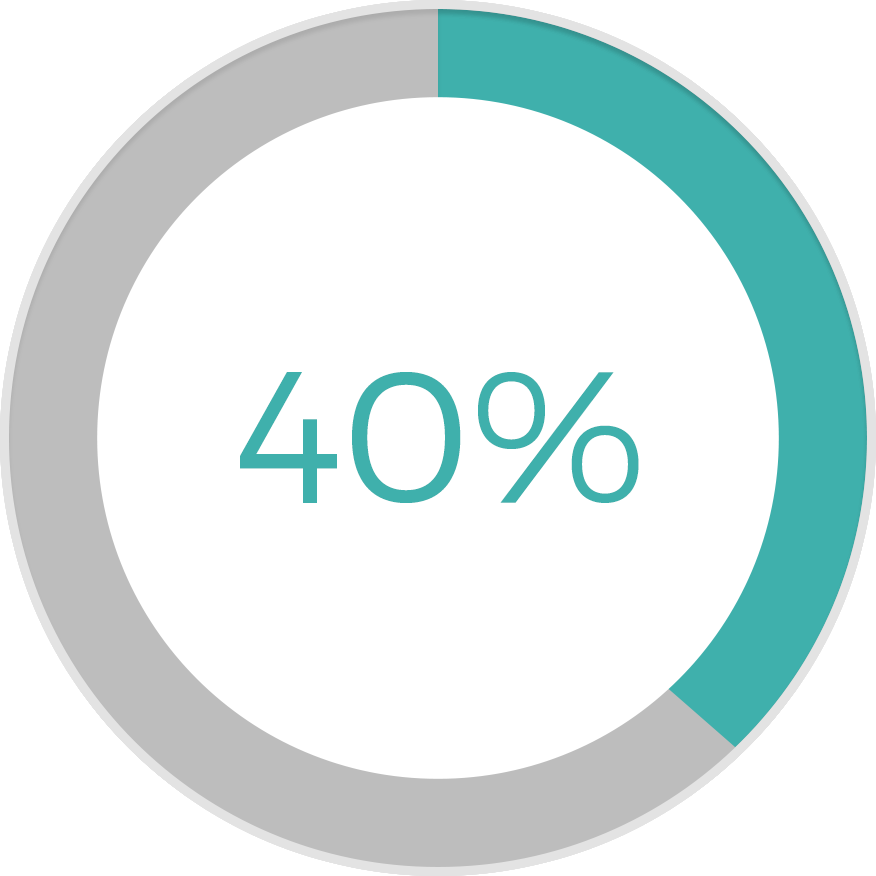
<style>
.page{position:relative;width:876px;height:876px;background:#ffffff}
.page>*{position:absolute;margin:0}
.t1{font:187.4px "Montserrat-Light";color:#3fb0ac}
</style>
<div class="page">
<p class="t1" style="left:239px;top:371px;width:404px;height:133px">80%</p>
<p class="t1" style="left:240px;top:371px;width:402px;height:133px">90%</p>
<p class="t1" style="left:240px;top:372px;width:399px;height:131px">40%</p>
<p class="t1" style="left:241px;top:371px;width:401px;height:133px">60%</p>
<p class="t1" style="left:243px;top:372px;width:394px;height:131px">70%</p>
</div>
